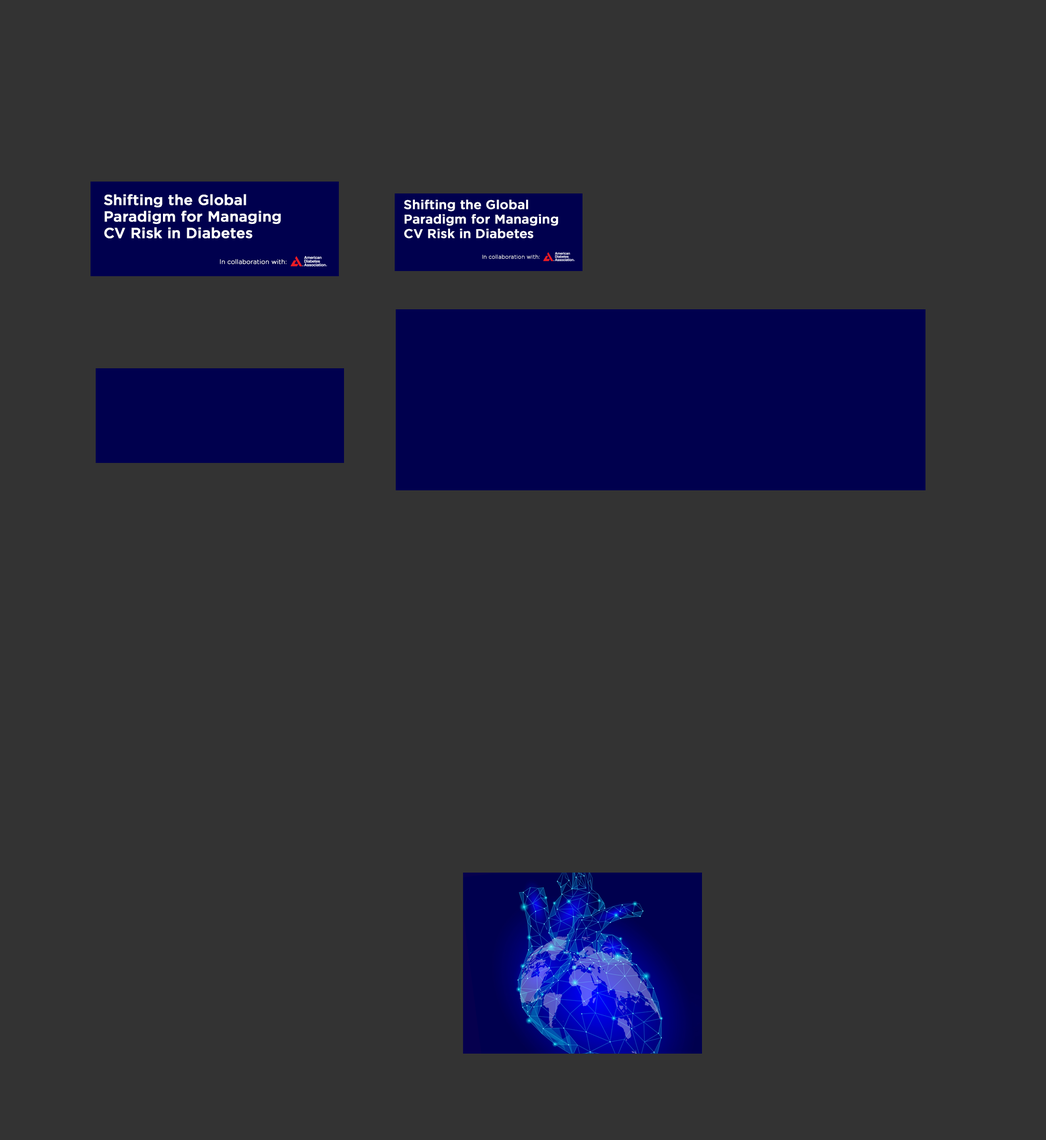
<style>
.page{position:relative;width:1046px;height:1140px;background:#333333}
.page>*{position:absolute;margin:0}
.t1{font:14.5px/16.6px "Gotham-Medium";color:#ffffff;font-weight:bold}
.t2{font:12.6px/14.4px "Gotham-Medium";color:#ffffff;font-weight:bold}
.t3{font:5.4px "Gotham-Light";color:#ffffff;font-weight:bold}
.t4{font:6.2px "Gotham-Light";color:#ffffff;font-weight:bold}
</style>
<div class="page">
<p class="t1" style="left:104px;top:194px;width:177px;height:44px">Shifting the Global <br>Paradigm for Managing <br>CV Risk in Diabetes</p>
<p class="t2" style="left:404px;top:200px;width:154px;height:38px">Shifting the Global <br>Paradigm for Managing <br>CV Risk in Diabetes</p>
<p class="t3" style="left:482px;top:254px;width:58px;height:5px">In collaboration with:</p>
<p class="t4" style="left:220px;top:259px;width:67px;height:5px">In collaboration with:</p>
</div>
